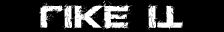
<style>
.page{position:relative;width:224px;height:32px;background:#000000}
.page>*{position:absolute;margin:0}
.t1{font:32px "Defused-ExtendedBold";letter-spacing:0.05em;color:#ffffff}
</style>
<div class="page">
<p class="t1" style="left:39px;top:0px;width:144px;height:32px">LIKE IT</p>
</div>
